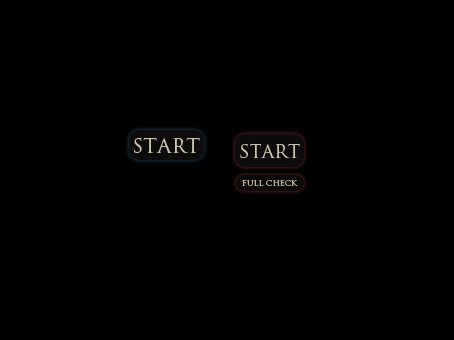
<style>
.page{position:relative;width:454px;height:340px;background:#000000}
.page>*{position:absolute;margin:0}
.t1{font:20px "TrajanPro-Regular";color:#ccc5ae}
.t2{font:18px "TrajanPro-Regular";color:#ccc5ae}
.t3{font:9px "TrajanPro-Regular";color:#bdb396}
</style>
<div class="page">
<p class="t1" style="left:134px;top:137px;width:66px;height:16px">START</p>
<p class="t2" style="left:240px;top:143px;width:60px;height:15px">START</p>
<p class="t3" style="left:242px;top:180px;width:56px;height:6px">full check</p>
</div>
